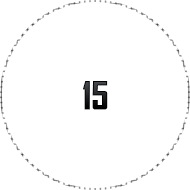
<style>
.page{position:relative;width:190px;height:190px;background:#ffffff}
.page>*{position:absolute;margin:0}
.t1{font:36.7px "AgencyFB-Bold";letter-spacing:-0.01em;text-transform:uppercase;font-weight:bold}
</style>
<div class="page">
<p class="t1" style="left:83px;top:81px;width:25px;height:29px">15</p>
</div>
